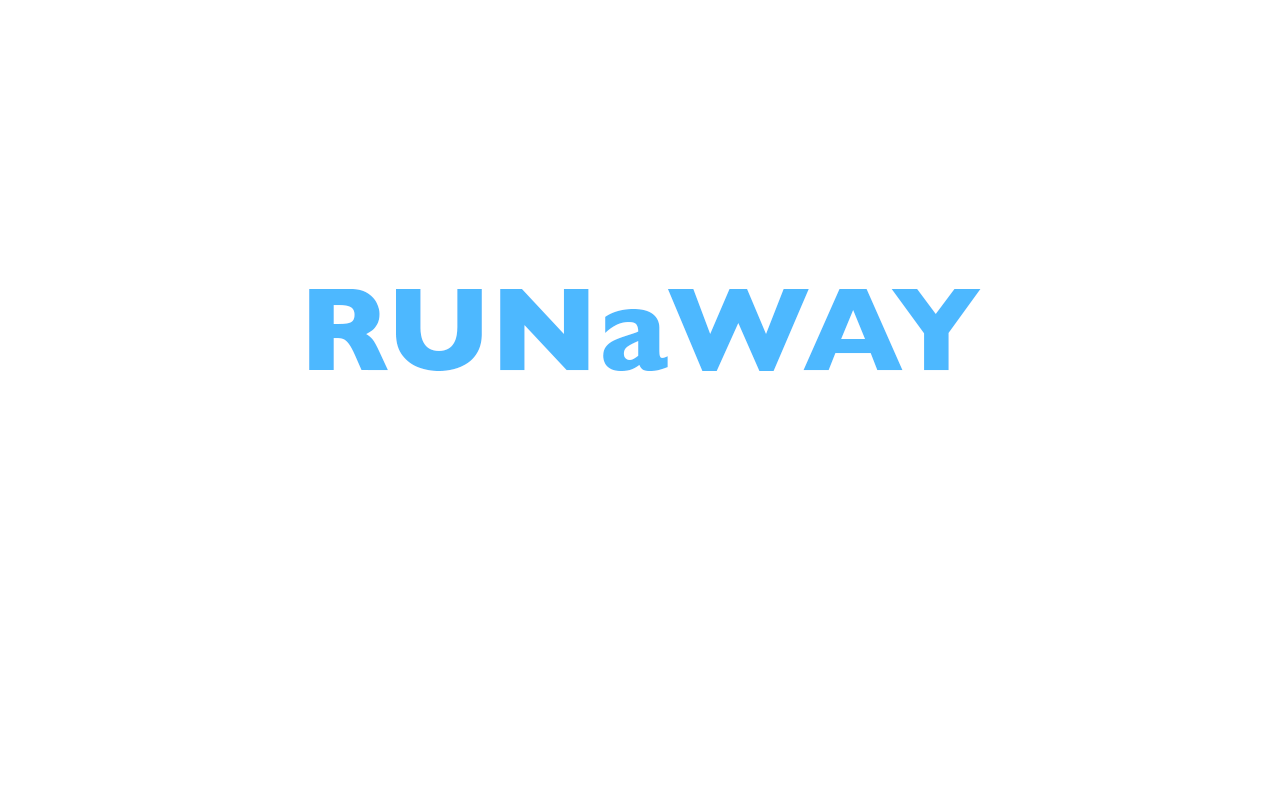
<style>
.page{position:relative;width:1280px;height:800px;background:#ffffff}
.page>*{position:absolute;margin:0}
.t1{font:120px "GillSans-Bold";color:#4db8ff}
</style>
<div class="page">
<p class="t1" style="left:309px;top:289px;width:672px;height:82px">RUNaWAY</p>
</div>
